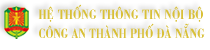
<style>
.page{position:relative;width:210px;height:50px;background:#ffffff}
.page>*{position:absolute;margin:0}
.t1{font:13.9px "VNI-Bodon-Bold";color:#d9c037;scale:0.76 1}
.t2{font:13.9px "VNI-Bodon-Bold";color:#d9c037;scale:0.74 1}
</style>
<div class="page">
<p class="t1" style="left:38px;top:4px;width:165px;height:18px">HEÄ THOÁNG THOÂNG TIN NOÄI BOÄ</p>
<p class="t2" style="left:39px;top:23px;width:166px;height:15px">COÂNG AN THAØNH PHOÁ ÑAØ NAÜNG</p>
</div>
